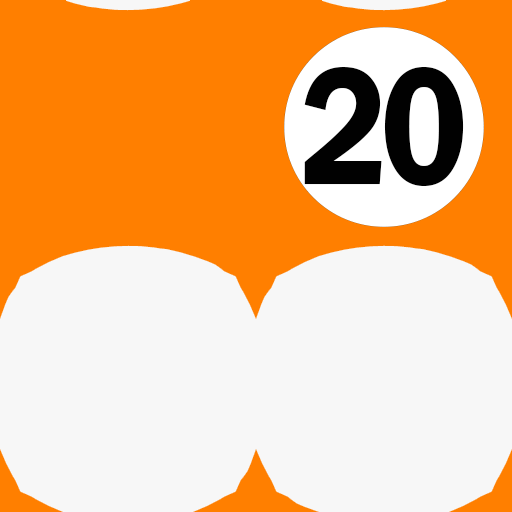
<style>
.page{position:relative;width:512px;height:512px;background:#f7f7f7}
.page>*{position:absolute;margin:0}
.t1{font:172.5px "FranklinGothic-Demi";letter-spacing:-0.05em;color:#010101;scale:0.87 1}
</style>
<div class="page">
<p class="t1" style="left:304px;top:67px;width:160px;height:119px">20</p>
</div>
